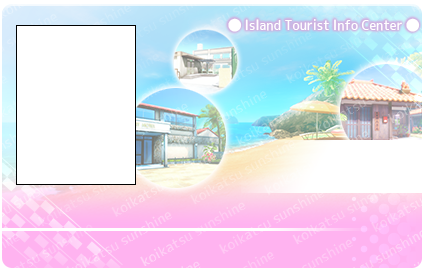
<style>
.page{position:relative;width:424px;height:272px;background:#ffffff}
.page>*{position:absolute;margin:0}
.t1{font:16px "JK-Gothic-M";color:#ffffff}
.t2{font:14px "JK-Gothic-M";color:#ffffff;scale:0.9 1}
</style>
<div class="page">
<p class="t1" style="left:228px;top:18px;width:14px;height:14px">●</p>
<p class="t2" style="left:245px;top:19px;width:157px;height:12px">Island Tourist Info Center</p>
<p class="t1" style="left:406px;top:18px;width:14px;height:14px">●</p>
</div>
